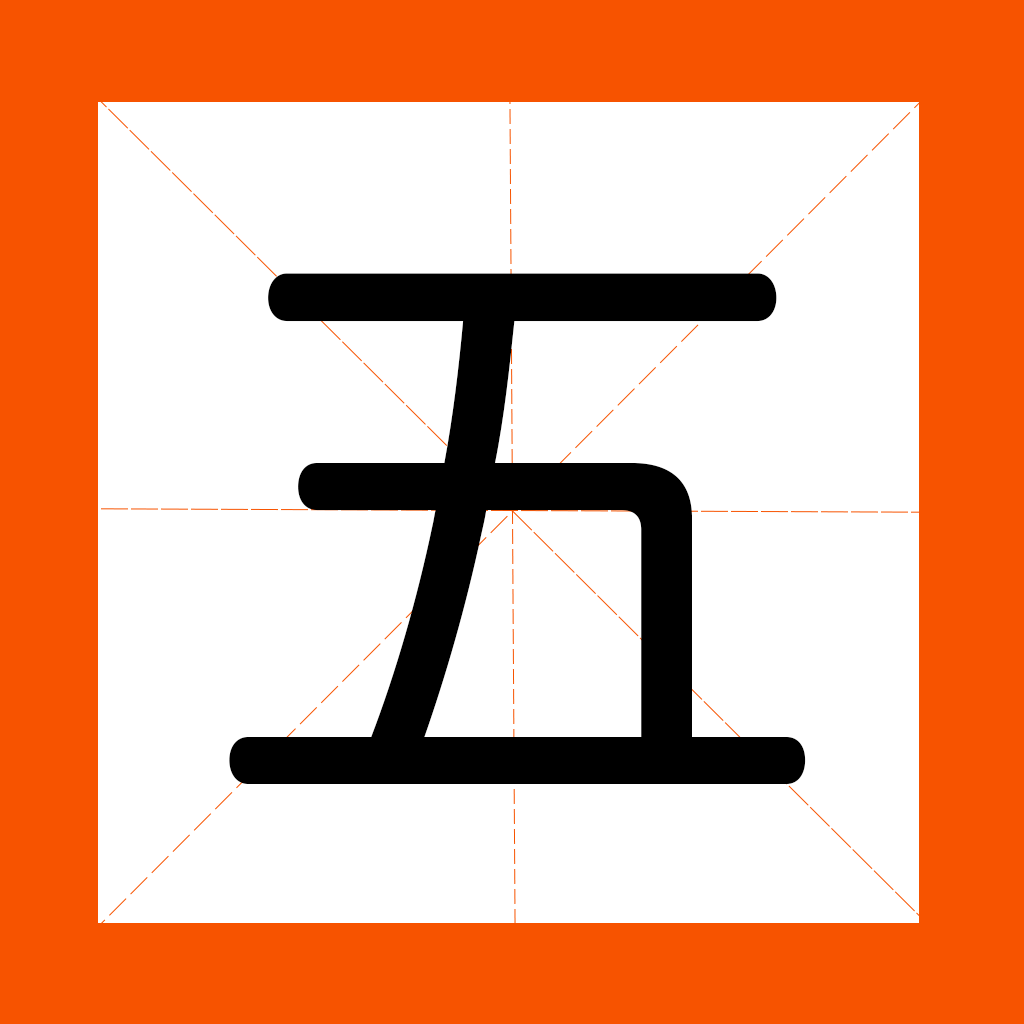
<style>
.page{position:relative;width:1024px;height:1024px;background:#ffffff}
.page>*{position:absolute;margin:0}
.t1{font:625px "HiraMaruProN-W4";color:#000000}
</style>
<div class="page">
<p class="t1" style="left:229px;top:273px;width:577px;height:511px">五</p>
</div>
